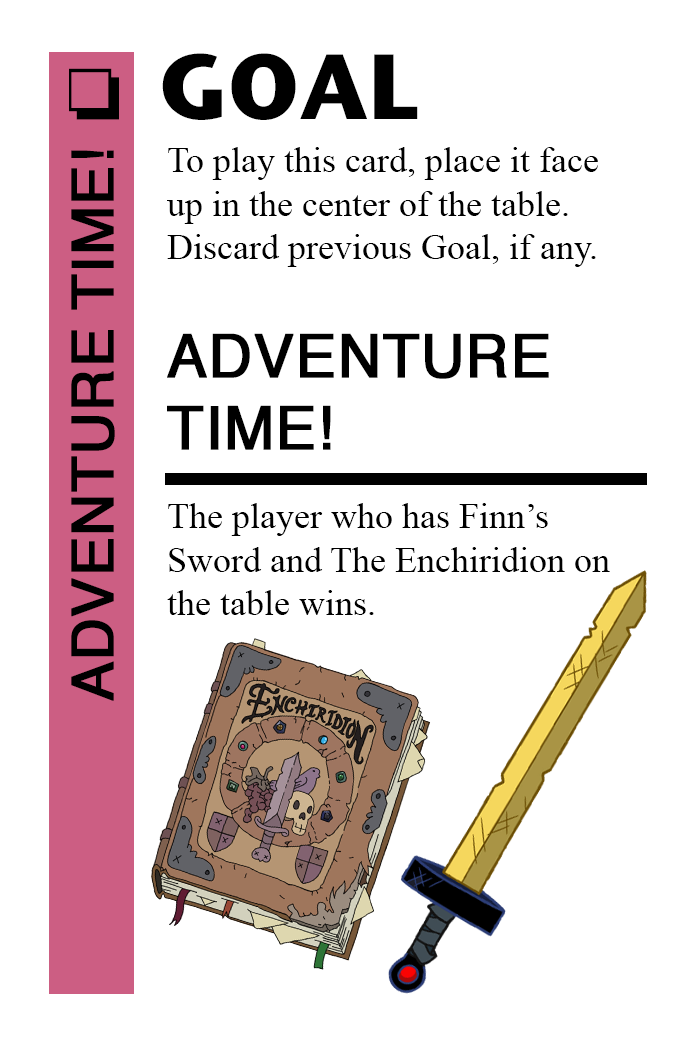
<style>
.page{position:relative;width:700px;height:1042px;background:#ffffff}
.page>*{position:absolute;margin:0}
.t1{font:92px "StoneSansITC-Bold";color:#000000}
.t2{font:72px "MS-Gothic";color:#000000}
.t3{font:58px "Helvetica";color:#000000;font-weight:bold}
.t4{font:36px "TimesNewRomanPSMT";color:#000000}
.t5{font:60px "Helvetica";color:#000000;font-weight:bold}
</style>
<div class="page">
<p class="t1" style="left:162px;top:53px;width:256px;height:67px">GOAL</p>
<p class="t2" style="left:69px;top:68px;width:50px;height:52px">❏</p>
<p class="t3" style="left:71px;top:150px;width:44px;height:551px;rotate:-90deg">ADVENTURE TIME!</p>
<p class="t4" style="left:167px;top:147px;width:431px;height:120px">To play this card, place it face<br>up in the center of the table.<br>Discard previous Goal, if any.</p>
<p class="t5" style="left:167px;top:333px;width:382px;height:117px">ADVENTURE<br>TIME!</p>
<p class="t4" style="left:167px;top:503px;width:443px;height:112px">The player who has Finn’s<br>Sword and The Enchiridion on <br>the table wins.</p>
</div>
